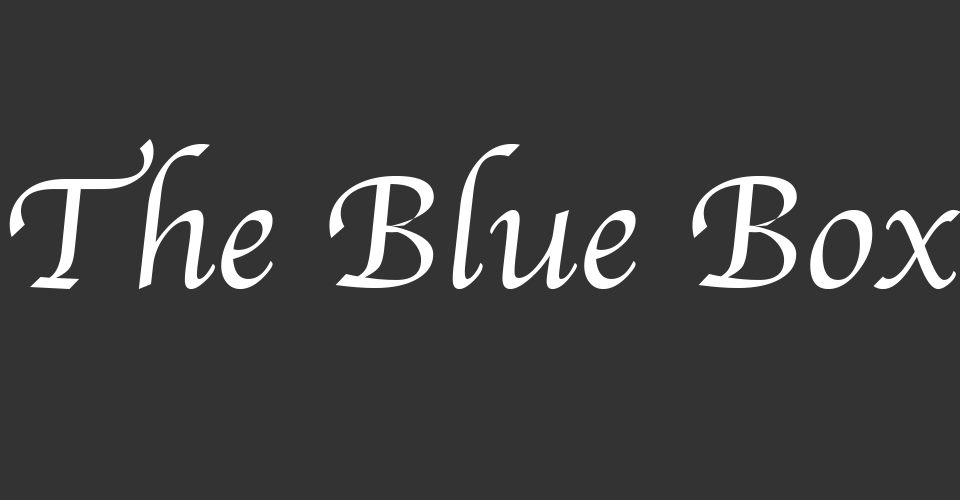
<style>
.page{position:relative;width:960px;height:500px;background:#333333}
.page>*{position:absolute;margin:0}
.t1{font:165px "Apple-Chancery";color:#ffffff}
</style>
<div class="page">
<p class="t1" style="left:9px;top:139px;width:952px;height:150px">The Blue Box</p>
</div>
